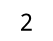
<style>
.page{position:relative;width:53px;height:41px;background:#ffffff}
.page>*{position:absolute;margin:0}
.t1{font:23.7px "DroidSans";color:#000000}
</style>
<div class="page">
<p class="t1" style="left:21px;top:13px;width:11px;height:18px">2</p>
</div>
